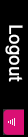
<style>
.page{position:relative;width:28px;height:137px;background:#000000}
.page>*{position:absolute;margin:0}
.t1{font:18px "ArialMT";color:#ffffff;font-weight:bold}
</style>
<div class="page">
<p class="t1" style="left:5px;top:25px;width:18px;height:57px;rotate:90deg">Logout</p>
</div>
